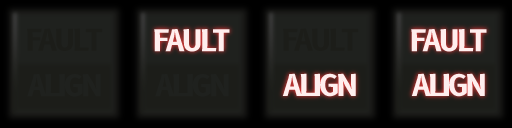
<style>
.page{position:relative;width:512px;height:128px}
.page>*{position:absolute;margin:0}
.t1{font:29.2px "B612-Bold";letter-spacing:-0.075em;color:#1c1d19}
.t2{font:29.2px "B612-Bold";letter-spacing:-0.075em;color:#1f211e}
</style>
<div class="page">
<p class="t1" style="left:27px;top:28px;width:76px;height:23px">FAULT</p>
<p class="t1" style="left:283px;top:28px;width:76px;height:23px">FAULT</p>
<p class="t2" style="left:27px;top:74px;width:74px;height:23px">ALIGN</p>
<p class="t2" style="left:155px;top:74px;width:74px;height:23px">ALIGN</p>
</div>
